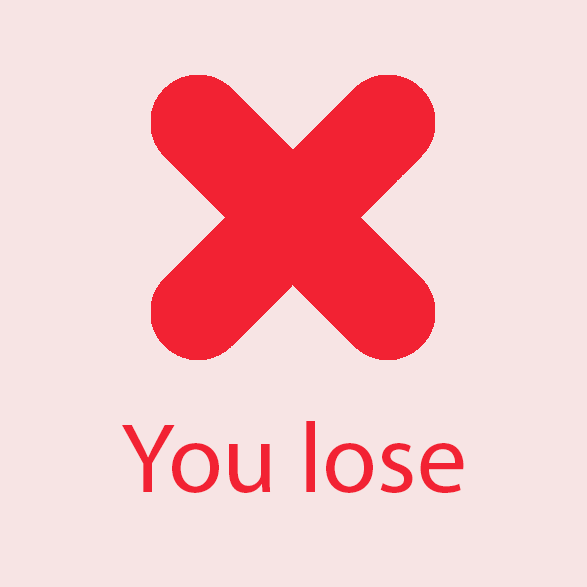
<style>
.page{position:relative;width:587px;height:587px;background:#f7e4e4}
.page>*{position:absolute;margin:0}
.t1{font:100px "MyriadPro-Regular";color:#f22233}
</style>
<div class="page">
<p class="t1" style="left:122px;top:421px;width:342px;height:72px">You lose</p>
</div>
